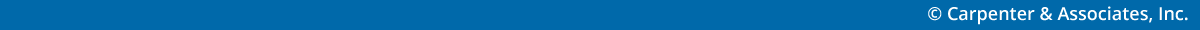
<style>
.page{position:relative;width:1200px;height:30px;background:#0069aa}
.page>*{position:absolute;margin:0}
.t1{font:18px "OpenSans-Semibold";color:#ffffff}
</style>
<div class="page">
<p class="t1" style="left:928px;top:6px;width:260px;height:19px">© Carpenter &amp; Associates, Inc.</p>
</div>
